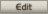
<style>
.page{position:relative;width:48px;height:14px}
.page>*{position:absolute;margin:0}
.t1{font:9.3px "HandelGotD-Ligh";color:#3d3a31;scale:0.96 1}
</style>
<div class="page">
<p class="t1" style="left:16px;top:3px;width:16px;height:7px">Edit</p>
</div>
